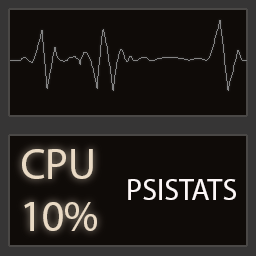
<style>
.page{position:relative;width:256px;height:256px;background:#0f0b08}
.page>*{position:absolute;margin:0}
.t1{font:43.4px "MyriadPro-Regular";color:#e9dac5}
.t2{font:30px "MyriadPro-Regular";color:#fdf6f6}
</style>
<div class="page">
<p class="t1" style="left:22px;top:149px;width:75px;height:82px">CPU<br>10%</p>
<p class="t2" style="left:128px;top:179px;width:108px;height:21px">PSISTATS</p>
</div>
